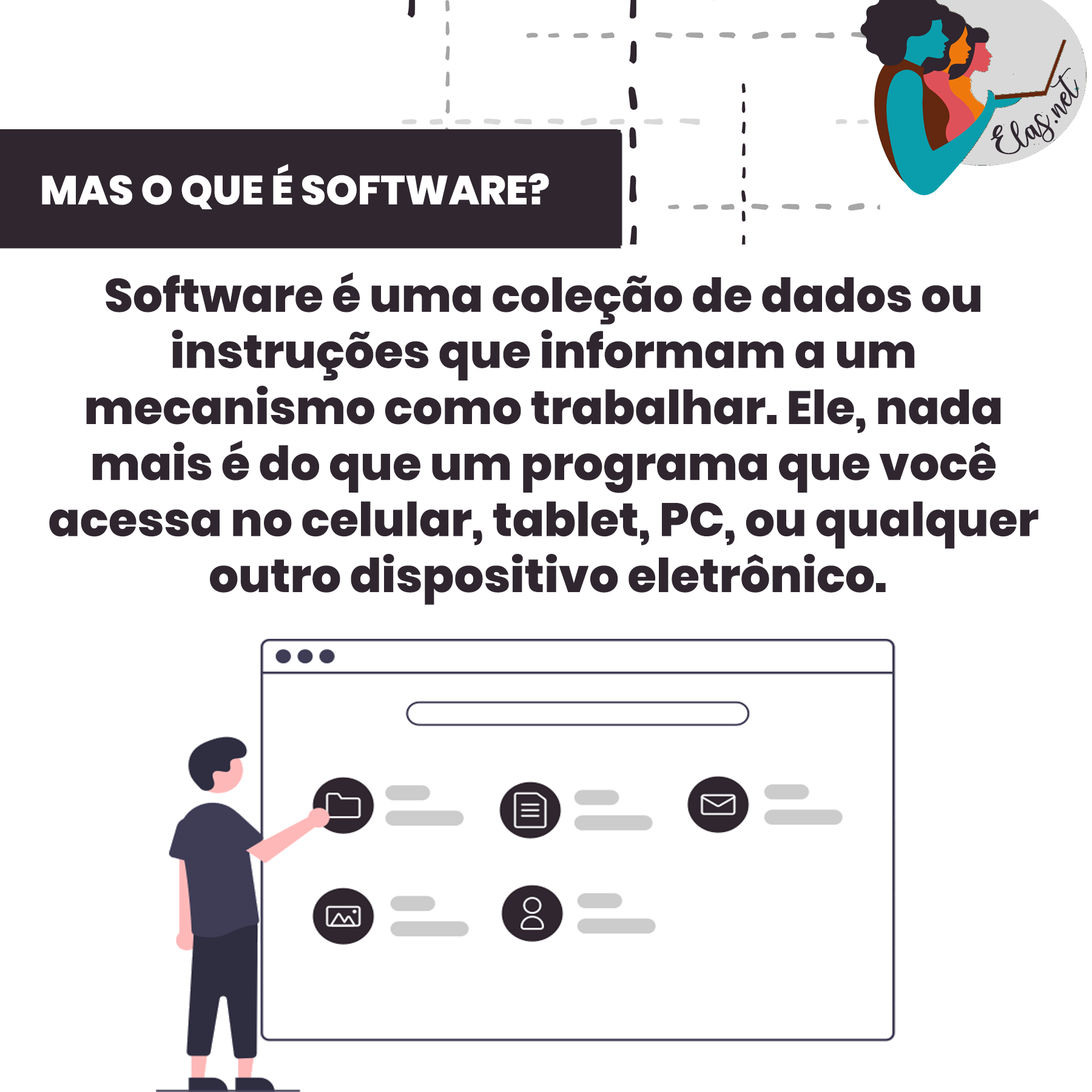
<style>
.page{position:relative;width:1092px;height:1092px;background:#ffffff}
.page>*{position:absolute;margin:0}
.t1{font:25px "charlinda-Regular";color:#2f262f;scale:1.18 1}
.t2{font:40.6px "Poppins-ExtraBold";color:#ffffff;text-transform:uppercase}
.t3{font:46.7px "Poppins-ExtraBold";color:#2f262f}
</style>
<div class="page">
<p class="t1" style="left:991px;top:67px;width:88px;height:88px;rotate:-42deg">Elas.net</p>
<p class="t2" style="left:42px;top:164px;width:507px;height:45px">Mas o que é software?</p>
<p class="t3" style="left:49px;top:272px;width:990px;height:333px;text-align:center">Software é uma coleção de dados ou <br>instruções que informam a um <br>mecanismo como trabalhar. Ele, nada <br>mais é do que um programa que você <br>acessa no celular, tablet, PC, ou qualquer <br>outro dispositivo eletrônico.</p>
</div>
